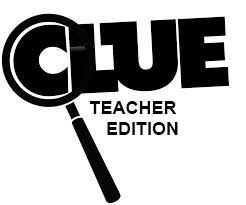
<style>
.page{position:relative;width:246px;height:205px;background:#ffffff}
.page>*{position:absolute;margin:0}
.t1{font:18px "Arial-BoldMT";color:#060606}
</style>
<div class="page">
<p class="t1" style="left:89px;top:101px;width:89px;height:34px">TEACHER <br>   EDITION</p>
</div>
